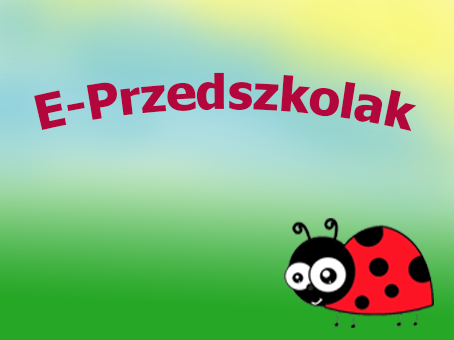
<style>
.page{position:relative;width:454px;height:340px}
.page>*{position:absolute;margin:0}
.t1{font:48px "Tahoma-Bold";color:#b3063d}
</style>
<div class="page">
<p class="t1" style="left:34px;top:72px;width:383px;height:60px">E-Przedszkolak</p>
</div>
